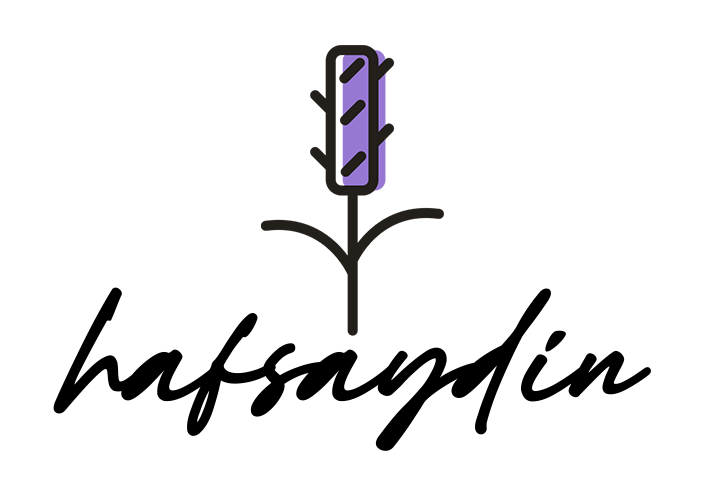
<style>
.page{position:relative;width:702px;height:498px;background:#ffffff}
.page>*{position:absolute;margin:0}
.t1{font:150px "BlackSignaturePERSONALUSEONLY-Regular";color:#000000}
</style>
<div class="page">
<p class="t1" style="left:53px;top:287px;width:598px;height:164px">hafsaydin</p>
</div>
